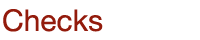
<style>
.page{position:relative;width:200px;height:40px;background:#ffffff}
.page>*{position:absolute;margin:0}
.t1{font:30px "HelveticaNeue";color:#931b0c}
</style>
<div class="page">
<p class="t1" style="left:3px;top:9px;width:100px;height:23px">Checks</p>
</div>
